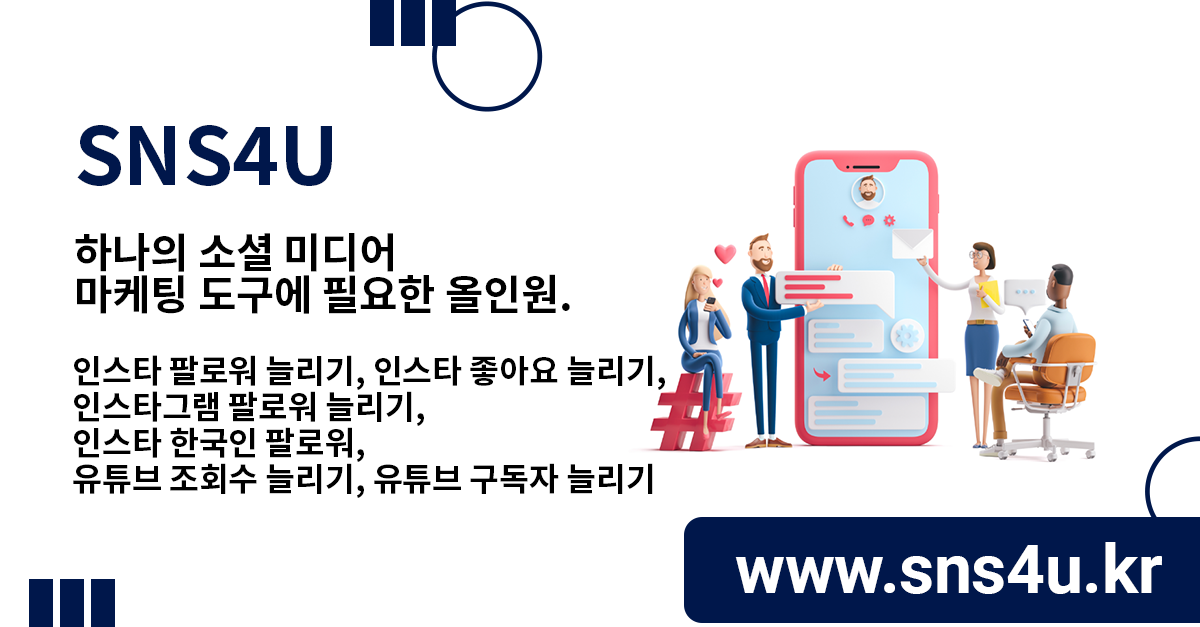
<style>
.page{position:relative;width:1200px;height:627px;background:#ffffff}
.page>*{position:absolute;margin:0}
.t1{font:41.7px/41.7px "NotoSansKR-Bold";letter-spacing:-0.005em;color:#000000}
.t2{font:79.8px/88.6px "NotoSansKR-Bold";letter-spacing:-0.005em;color:#00174b}
.t3{font:32.6px/36.2px "NotoSansKR-Bold";letter-spacing:-0.005em;color:#000000}
.t4{font:67.9px "Roboto-Bold";letter-spacing:-0.005em;color:#ffffff}
</style>
<div class="page">
<p class="t1" style="left:75px;top:125px;width:495px;height:189px"><span class="t2">SNS4U<br></span><br>하나의 소셜 미디어 <br>마케팅 도구에 필요한 올인원.</p>
<p class="t3" style="left:73px;top:355px;width:592px;height:143px">인스타 팔로워 늘리기, 인스타 좋아요 늘리기, <br>인스타그램 팔로워 늘리기,<br>인스타 한국인 팔로워, <br>유튜브 조회수 늘리기, 유튜브 구독자 늘리기</p>
<p class="t4" style="left:735px;top:542px;width:427px;height:52px">www.sns4u.kr</p>
</div>
